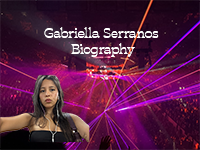
<style>
.page{position:relative;width:200px;height:150px}
.page>*{position:absolute;margin:0}
.t1{font:13.9px "Blackest-Medium";color:#ffffff}
</style>
<div class="page">
<p class="t1" style="left:44px;top:27px;width:115px;height:30px;text-align:center">Gabriella Serranos <br>Biography</p>
</div>
